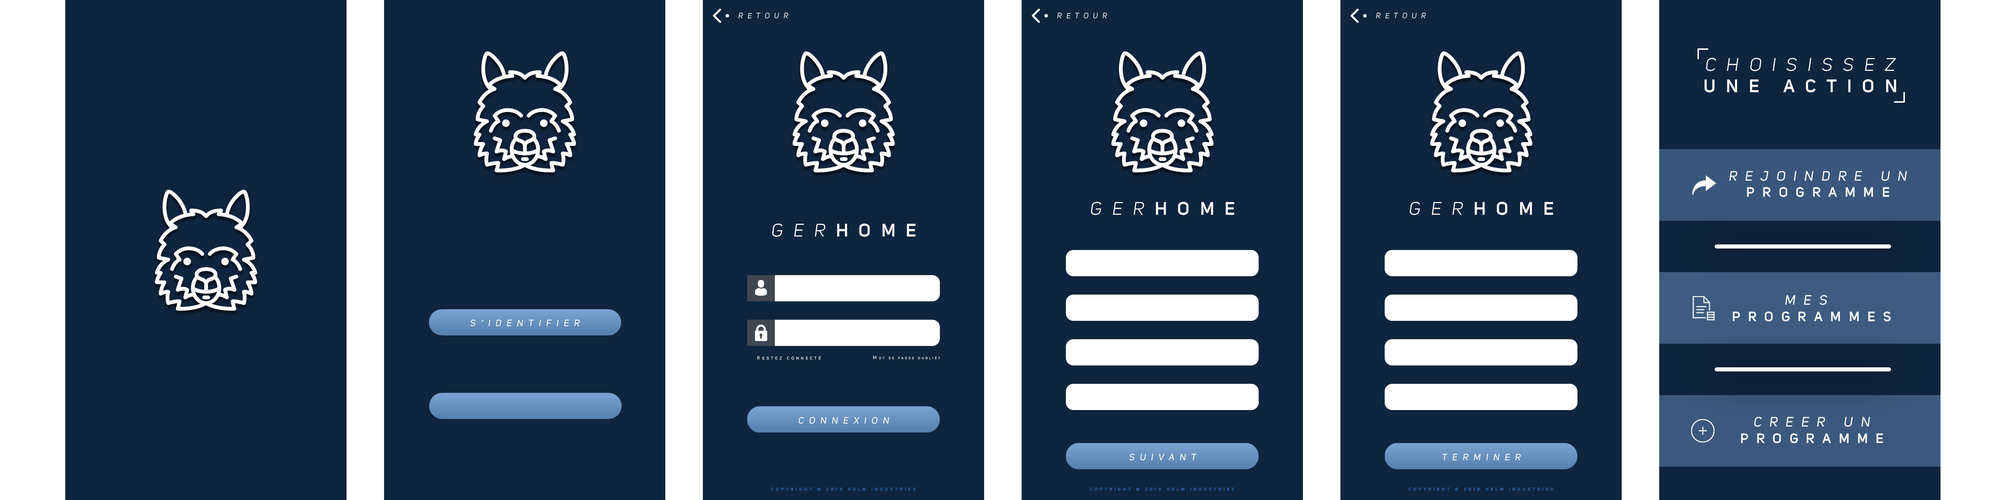
<style>
.page{position:relative;width:1996px;height:500px;background:#0f253f}
.page>*{position:absolute;margin:0}
.t1{font:18px "UniSansBookItalic";letter-spacing:0.585em;color:#ffffff;text-transform:uppercase}
.t2{font:18px "UniSansSemiBold";letter-spacing:0.585em;color:#ffffff;text-transform:uppercase}
.t3{font:13.5px "UniSansRegularItalic";letter-spacing:0.585em;color:#ffffff;text-transform:uppercase}
.t4{font:13.5px "UniSansSemiBold";letter-spacing:0.585em;color:#ffffff;text-transform:uppercase}
.t5{font:9px "UniSansRegularItalic";letter-spacing:0.585em;color:#ffffff;text-transform:uppercase}
.t6{font:3.8px "UniSansBook";letter-spacing:0.585em;color:#ffffff;text-transform:uppercase}
.t7{font:4.5px "UniSansBook";letter-spacing:0.585em;color:#ffffff;text-transform:uppercase}
.t8{font:3px "UniSansBook";letter-spacing:0.585em;color:#ffffff;text-transform:uppercase}
.t9{font:4.1px "UniSansSemiBoldItalic";letter-spacing:0.585em;color:#2a69b4;text-transform:uppercase}
</style>
<div class="page">
<p class="t1" style="left:1704px;top:58px;width:192px;height:35px;text-align:center">Choisissez<br><span class="t2">une action</span></p>
<p class="t3" style="left:1729px;top:171px;width:177px;height:26px;text-align:center">rejoindre un<br><span class="t4">programme</span></p>
<p class="t2" style="left:1091px;top:202px;width:143px;height:13px"><span class="t1">Ger</span>home</p>
<p class="t2" style="left:1410px;top:202px;width:143px;height:13px"><span class="t1">Ger</span>home</p>
<p class="t2" style="left:772px;top:224px;width:143px;height:13px"><span class="t1">Ger</span>home</p>
<p class="t4" style="left:1732px;top:295px;width:158px;height:27px;text-align:center"><span class="t3">mes <br></span>programmes</p>
<p class="t5" style="left:470px;top:320px;width:110px;height:7px">S’identifier</p>
<p class="t6" style="left:757px;top:356px;width:64px;height:4px"><span class="t7">r</span>estez connecté</p>
<p class="t8" style="left:873px;top:356px;width:67px;height:4px"><span class="t7">M</span>ot de passe oublié?</p>
<p class="t5" style="left:798px;top:417px;width:91px;height:7px">connexion</p>
<p class="t4" style="left:1741px;top:417px;width:142px;height:27px;text-align:center"><span class="t3">creer un<br></span>programme</p>
<p class="t5" style="left:1129px;top:454px;width:68px;height:7px">SUIVANT</p>
<p class="t5" style="left:1442px;top:454px;width:79px;height:7px">tERMINER</p>
<p class="t9" style="left:771px;top:488px;width:144px;height:3px">Copyright © 2018 helm industries</p>
<p class="t9" style="left:1090px;top:488px;width:144px;height:3px">Copyright © 2018 helm industries</p>
<p class="t9" style="left:1408px;top:488px;width:145px;height:3px">Copyright © 2018 helm industries</p>
</div>
